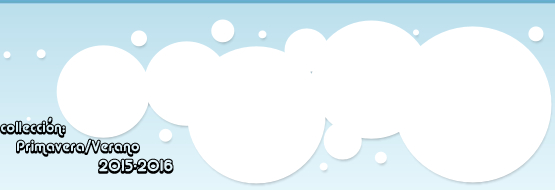
<style>
.page{position:relative;width:555px;height:190px;background:#ffffff}
.page>*{position:absolute;margin:0}
.t1{font:14.7px "AlbaSuper";color:#000000}
.t2{font:16px "AlbaSuper";color:#000000}
</style>
<div class="page">
<p class="t1" style="left:0px;top:116px;width:66px;height:22px">collección:</p>
<p class="t1" style="left:16px;top:138px;width:124px;height:19px">Primavera/Verano</p>
<p class="t2" style="left:98px;top:158px;width:76px;height:16px">2015-2016</p>
</div>
